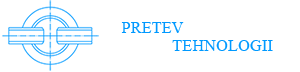
<style>
.page{position:relative;width:300px;height:72px;background:#ffffff}
.page>*{position:absolute;margin:0}
.t1{font:16.5px "TimesNewRomanPSMT";color:#0099ff}
</style>
<div class="page">
<p class="t1" style="left:121px;top:22px;width:63px;height:11px">PRETEV</p>
<p class="t1" style="left:172px;top:40px;width:101px;height:11px">TEHNOLOGII</p>
</div>
